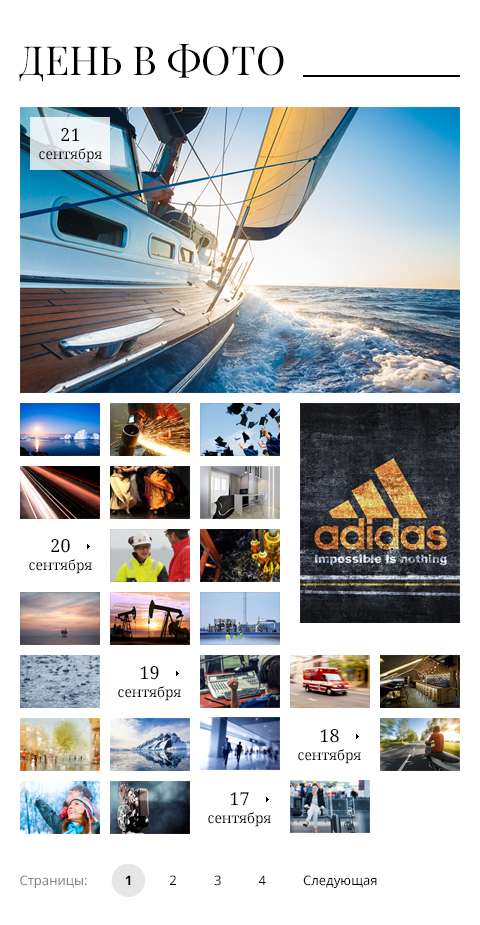
<style>
.page{position:relative;width:480px;height:925px;background:#ffffff}
.page>*{position:absolute;margin:0}
.t1{font:40px "PlayfairDisplay-Regular";color:#010101;text-transform:uppercase}
.t2{font:14px/18px "NotoSerif";color:#000000}
.t3{font:18px/24px "NotoSerif";color:#000000}
.t4{font:13px "NotoSans";color:#000000}
.t5{font:13px "NotoSans";color:#848484}
.t6{font:13px "NotoSans-Bold";color:#000000}
</style>
<div class="page">
<p class="t1" style="left:19px;top:43px;width:265px;height:39px">День в фото</p>
<p class="t2" style="left:39px;top:128px;width:63px;height:35px;text-align:center"><span class="t3">21<br></span>сентября</p>
<p class="t2" style="left:29px;top:539px;width:63px;height:35px;text-align:center"><span class="t3">20<br></span>сентября</p>
<p class="t2" style="left:118px;top:666px;width:63px;height:35px;text-align:center"><span class="t3">19<br></span>сентября</p>
<p class="t2" style="left:298px;top:729px;width:63px;height:35px;text-align:center"><span class="t3">18<br></span>сентября</p>
<p class="t2" style="left:208px;top:792px;width:63px;height:35px;text-align:center"><span class="t3">17<br></span>сентября</p>
<p class="t4" style="left:20px;top:875px;width:357px;height:13px"><span class="t5">Страницы:           </span><span class="t6">1</span>           2           3           4           Следующая</p>
</div>
